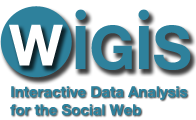
<style>
.page{position:relative;width:196px;height:120px;background:#ffffff}
.page>*{position:absolute;margin:0}
.t1{font:15px "HelveticaNeue-Bold";color:#2e819c}
</style>
<div class="page">
<p class="t1" style="left:10px;top:86px;width:178px;height:30px">Interactive Data Analysis <br>for the Social Web</p>
</div>
